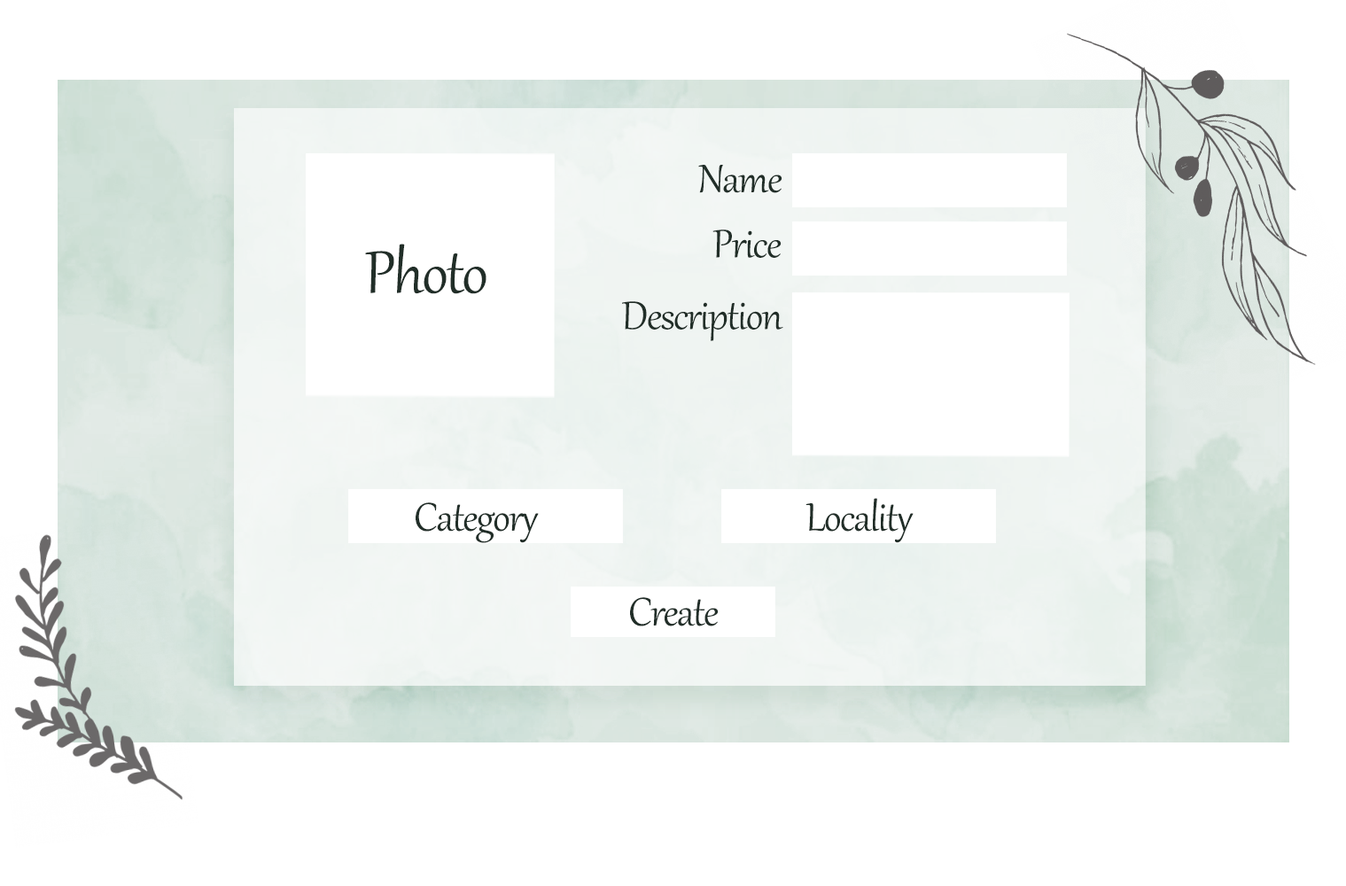
<style>
.page{position:relative;width:1346px;height:886px;background:#ffffff}
.page>*{position:absolute;margin:0}
.t1{font:48.6px "Gabriola";letter-spacing:-0.025em;color:#212e28}
.t2{font:73.3px "Gabriola";letter-spacing:-0.025em;color:#212e28}
</style>
<div class="page">
<p class="t1" style="left:698px;top:165px;width:84px;height:28px">Name</p>
<p class="t1" style="left:712px;top:229px;width:69px;height:29px">Price</p>
<p class="t2" style="left:365px;top:244px;width:121px;height:50px">Photo</p>
<p class="t1" style="left:622px;top:301px;width:161px;height:40px">Description</p>
<p class="t1" style="left:805px;top:498px;width:108px;height:45px">Locality</p>
<p class="t1" style="left:416px;top:502px;width:123px;height:41px">Category</p>
<p class="t1" style="left:630px;top:597px;width:89px;height:29px">Create</p>
</div>
